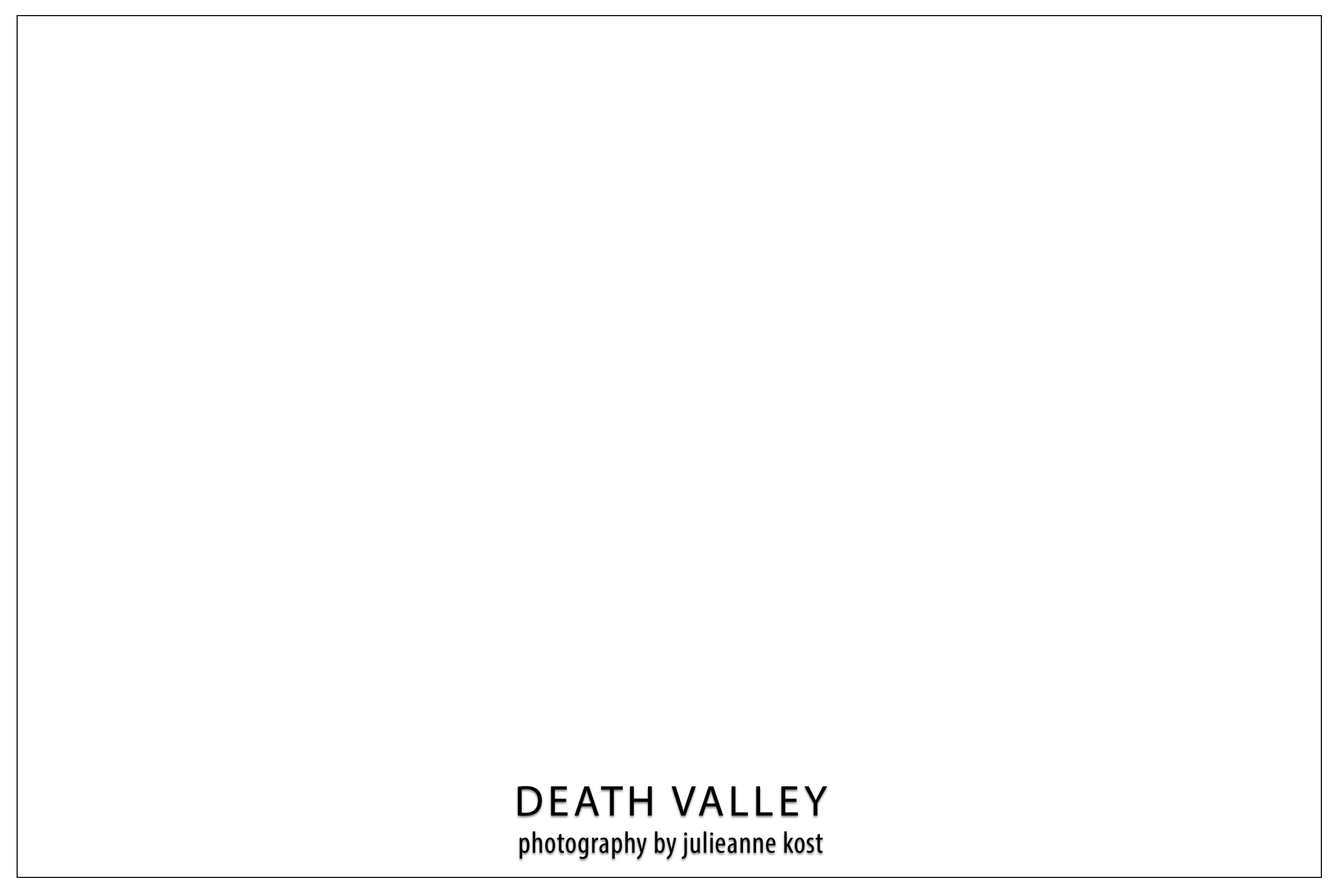
<style>
.page{position:relative;width:1338px;height:892px;background:#ffffff}
.page>*{position:absolute;margin:0}
.t1{font:31px/37.1px "MyriadPro-Cond";letter-spacing:0.02em;color:#000000}
.t2{font:43.3px/37.1px "MyriadPro-Regular";letter-spacing:0.1em;color:#000000}
</style>
<div class="page">
<p class="t1" style="left:517px;top:785px;width:310px;height:74px;text-align:center"><span class="t2">DEATH VALLEY<br></span>photography by julieanne kost</p>
</div>
